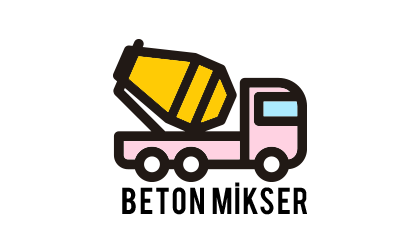
<style>
.page{position:relative;width:420px;height:240px;background:#ffffff}
.page>*{position:absolute;margin:0}
.t1{font:29.5px "Bebas";letter-spacing:0.054em;color:#000000}
</style>
<div class="page">
<p class="t1" style="left:122px;top:182px;width:185px;height:33px">BETON MİKSER</p>
</div>
